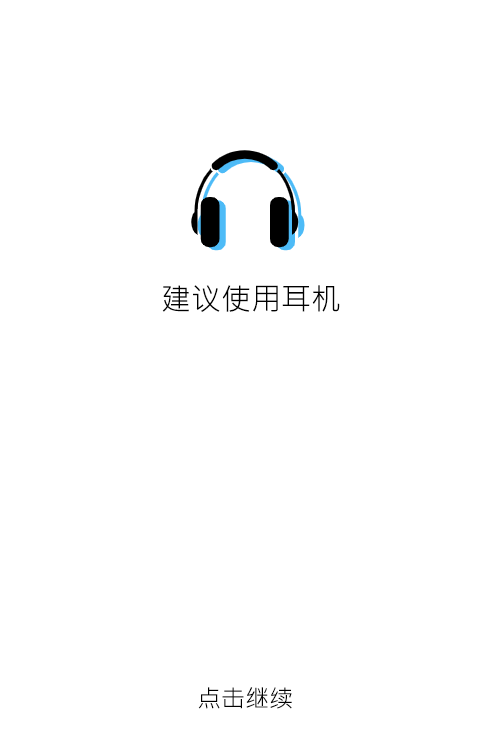
<style>
.page{position:relative;width:490px;height:740px;background:#ffffff}
.page>*{position:absolute;margin:0}
.t1{font:30px "MicrosoftJhengHeiUIRegular";color:#000000;text-transform:uppercase}
.t2{font:24px "MicrosoftJhengHeiRegular";color:#000000;text-transform:uppercase}
</style>
<div class="page">
<p class="t1" style="left:162px;top:285px;width:178px;height:27px">建议使用耳机</p>
<p class="t2" style="left:198px;top:687px;width:94px;height:22px">点击继续</p>
</div>
